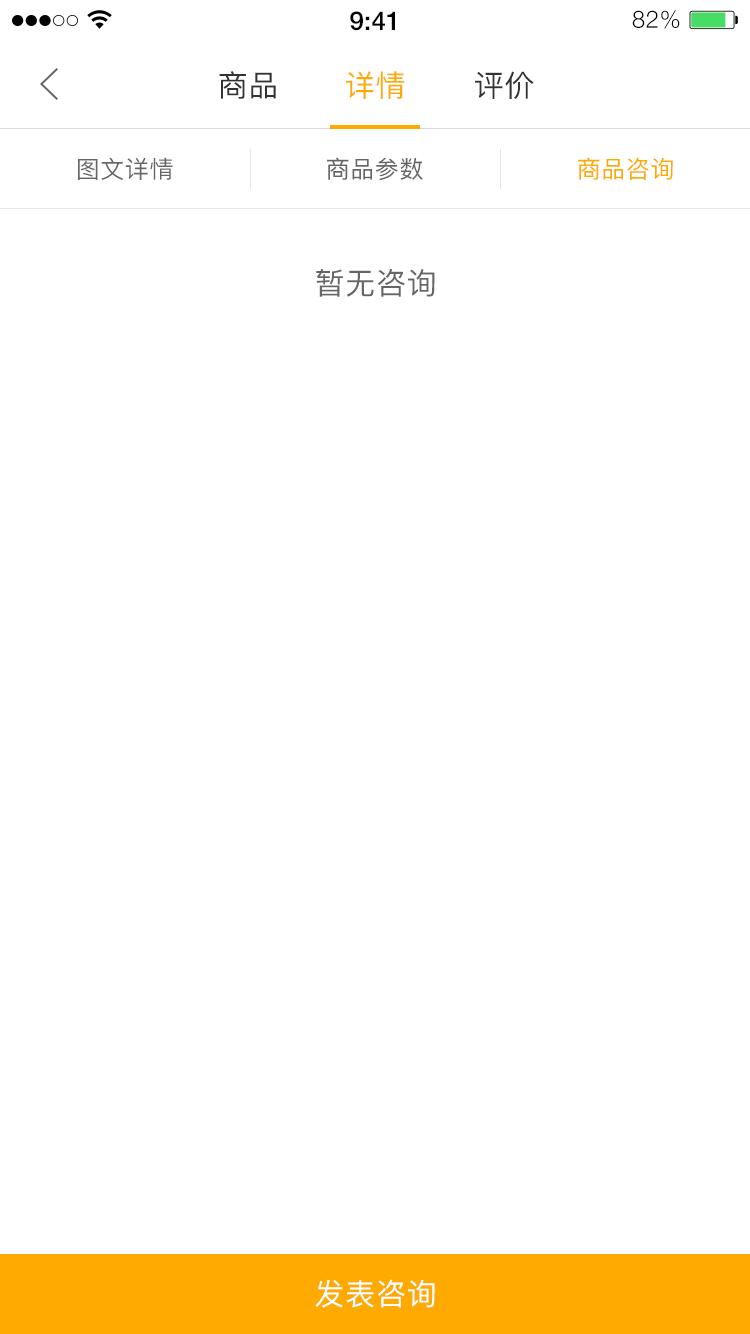
<style>
.page{position:relative;width:750px;height:1334px;background:#ffffff}
.page>*{position:absolute;margin:0}
.t1{font:26px "HelveticaNeue-Medium";color:#000000}
.t2{font:24px "HelveticaNeue-Light";letter-spacing:0.025em;color:#000000}
.t3{font:30px "PingFang-SC-Medium";letter-spacing:0.025em;color:#333333}
.t4{font:30px "PingFang-SC-Medium";letter-spacing:0.025em;color:#ffaa00}
.t5{font:24px "PingFang-SC-Medium";letter-spacing:0.025em;color:#666666}
.t6{font:24px "PingFang-SC-Medium";letter-spacing:0.025em;color:#ffaa00}
.t7{font:30px "PingFang-SC-Medium";letter-spacing:0.025em;color:#666666}
.t8{font:30px "PingFang-SC-Medium";letter-spacing:0.025em;color:#ffffff}
</style>
<div class="page">
<p class="t1" style="left:350px;top:11px;width:45px;height:20px">9:41</p>
<p class="t2" style="left:632px;top:10px;width:48px;height:19px">82%</p>
<p class="t3" style="left:219px;top:71px;width:57px;height:28px">商品</p>
<p class="t4" style="left:346px;top:71px;width:59px;height:28px">详情</p>
<p class="t3" style="left:475px;top:71px;width:59px;height:28px">评价</p>
<p class="t5" style="left:78px;top:157px;width:95px;height:23px">图文详情</p>
<p class="t5" style="left:327px;top:157px;width:96px;height:23px">商品参数</p>
<p class="t6" style="left:578px;top:157px;width:95px;height:23px">商品咨询</p>
<p class="t7" style="left:316px;top:269px;width:119px;height:28px">暂无咨询</p>
<p class="t8" style="left:315px;top:1279px;width:120px;height:29px">发表咨询</p>
</div>
